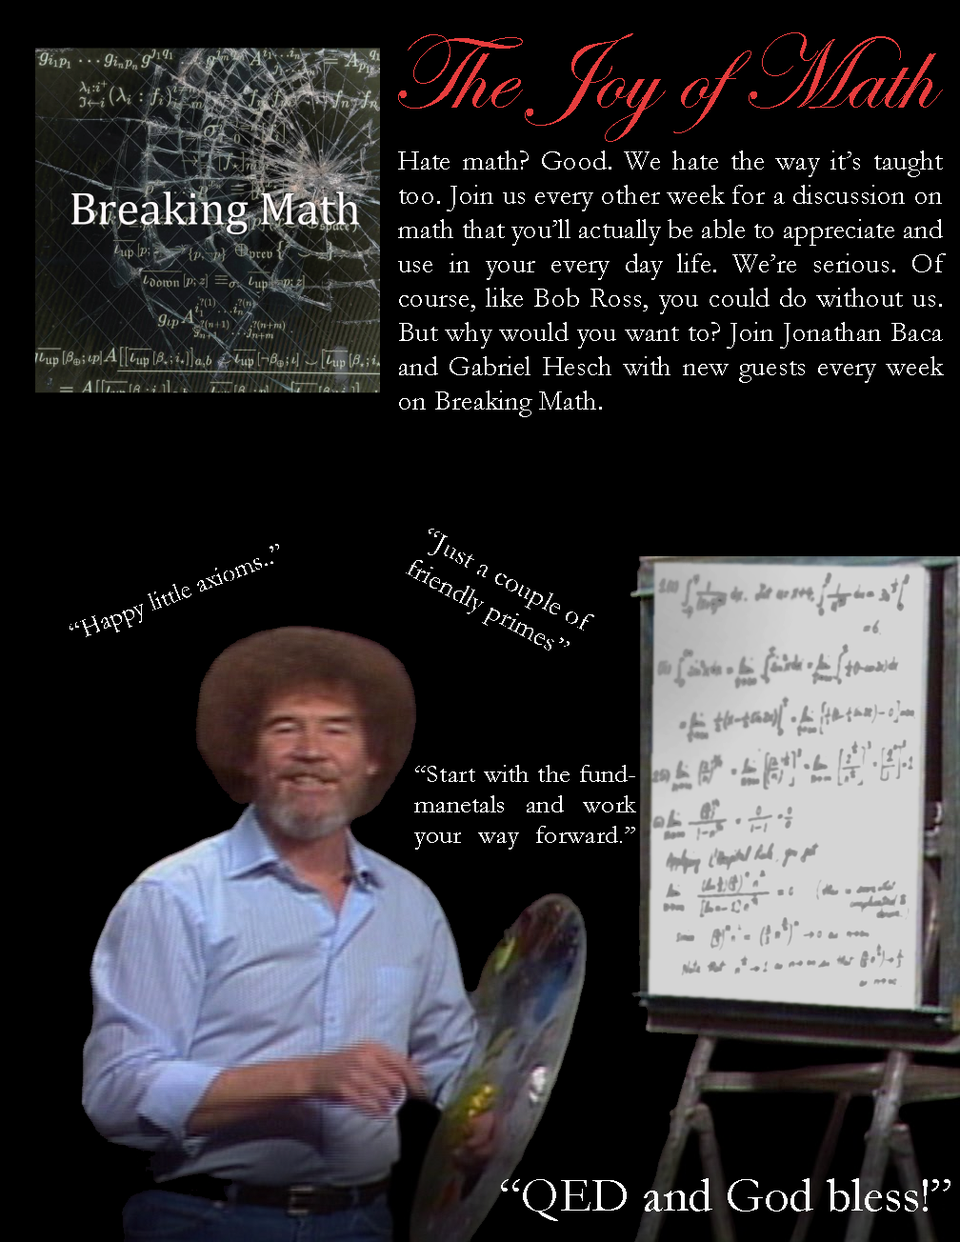
<style>
.page{position:relative;width:960px;height:1242px;background:#000000}
.page>*{position:absolute;margin:0}
.t1{font:107.3px "EdwardianScriptITC";color:#e73d3d}
.t2{font:28.6px "Garamond";color:#ffffff}
.t3{font:26.7px "Garamond";color:#ffffff;scale:0.96 1}
.t4{font:25.6px "Garamond";color:#ffffff;scale:1.06 1}
.t5{font:49.7px "Garamond";color:#ffffff}
</style>
<div class="page">
<p class="t1" style="left:398px;top:32px;width:545px;height:110px">The Joy of Math</p>
<p class="t2" style="left:398px;top:150px;width:548px;height:267px;text-align:justify">Hate math? Good. We hate the way it’s taught too. Join us every other week for a discussion on math that you’ll actually be able to appreciate and use in your every day life. We’re serious. Of course, like Bob Ross, you could do without us. But why would you want to? Join Jonathan Baca and Gabriel Hesch with new guests every week on Breaking Math.</p>
<p class="t2" style="left:406px;top:529px;width:188px;height:122px;text-align:justify;rotate:28deg">“Just a couple of<br>friendly primes”</p>
<p class="t3" style="left:70px;top:544px;width:209px;height:93px;rotate:-21deg">“Happy little axioms..”</p>
<p class="t4" style="left:414px;top:765px;width:222px;height:85px;text-align:justify">“Start with the fundmanetals and work your way forward.”<br>arard.<br>””</p>
<p class="t5" style="left:501px;top:1178px;width:450px;height:43px">“QED and God bless!”</p>
</div>
